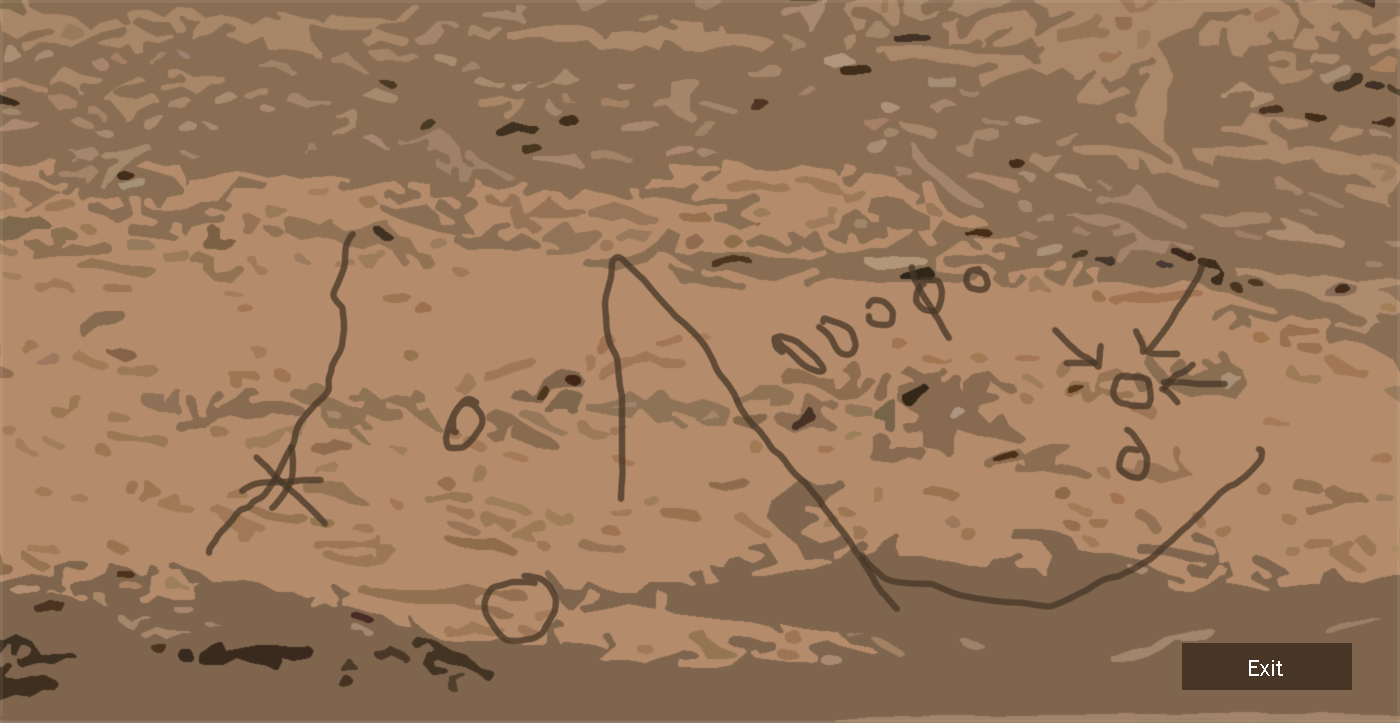
<style>
.page{position:relative;width:1400px;height:723px;background:#b48c6b}
.page>*{position:absolute;margin:0}
.t1{font:24px "FranklinGothic-Book";color:#ffffff}
</style>
<div class="page">
<p class="t1" style="left:1249px;top:660px;width:34px;height:16px">Exit</p>
</div>
